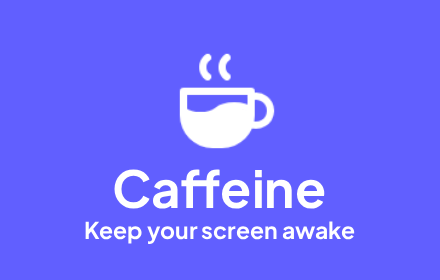
<style>
.page{position:relative;width:440px;height:280px;background:#615fff}
.page>*{position:absolute;margin:0}
.t1{font:51px "PlusJakartaSans-Bold";color:#ffffff}
.t2{font:23px "PlusJakartaSans-Bold";color:#ffffff}
</style>
<div class="page">
<p class="t1" style="left:114px;top:169px;width:211px;height:40px">Caffeine</p>
<p class="t2" style="left:85px;top:221px;width:270px;height:24px">Keep your screen awake</p>
</div>
